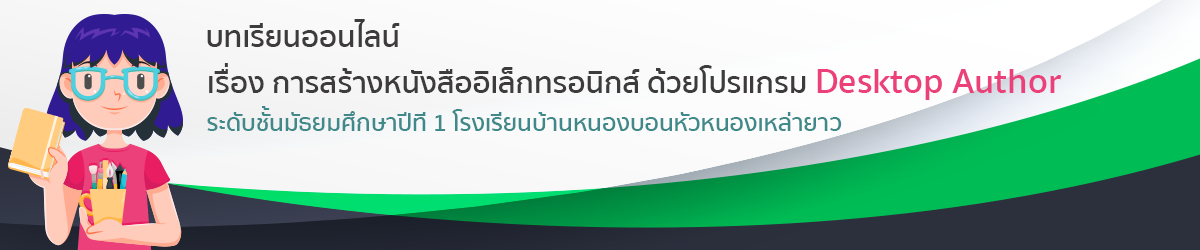
<style>
.page{position:relative;width:1200px;height:250px}
.page>*{position:absolute;margin:0}
.t1{font:30px "SukhumvitSet-SemiBold";color:#3d3b3b}
.t2{font:36px "SukhumvitSet-SemiBold";color:#eb4079}
.t3{font:24px "SukhumvitSet-SemiBold";color:#3f898a}
</style>
<div class="page">
<p class="t1" style="left:207px;top:19px;width:193px;height:28px">บทเรียนออนไลน์</p>
<p class="t1" style="left:209px;top:63px;width:853px;height:37px">เรื่อง การสร้างหนังสืออิเล็กทรอนิกส์ ด้วยโปรแกรม <span class="t2">Desktop Author</span></p>
<p class="t3" style="left:207px;top:106px;width:635px;height:25px">ระดับชั้นมัธยมศึกษาปีที 1 โรงเรียนบ้านหนองบอนหัวหนองเหล่ายาว</p>
</div>
